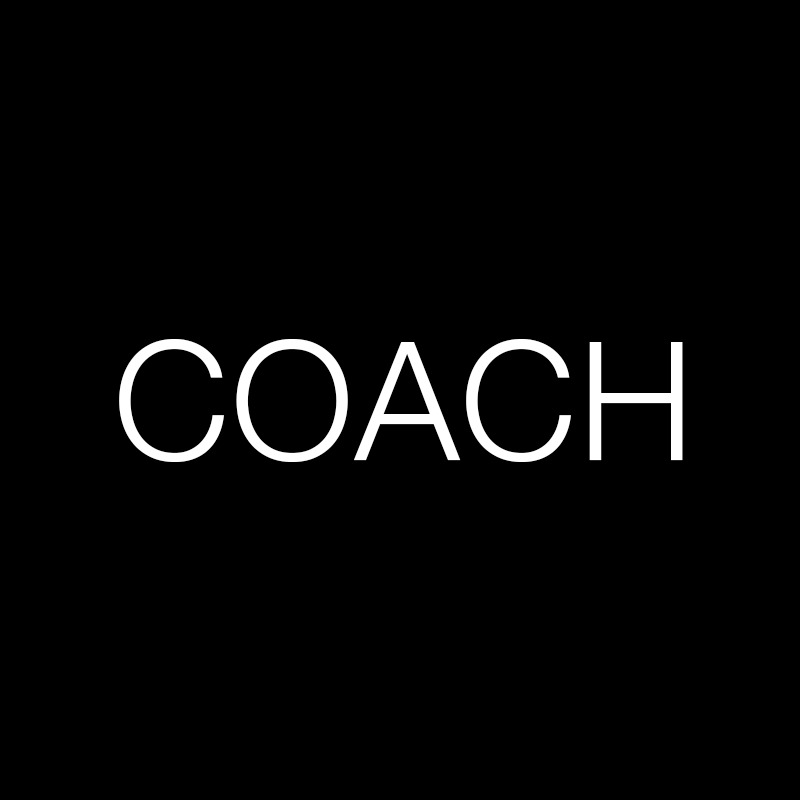
<style>
.page{position:relative;width:800px;height:800px;background:#000000}
.page>*{position:absolute;margin:0}
.t1{font:165px "HelveticaNeue-Light";letter-spacing:0.01em;color:#ffffff}
</style>
<div class="page">
<p class="t1" style="left:119px;top:339px;width:564px;height:123px">COACH</p>
</div>
